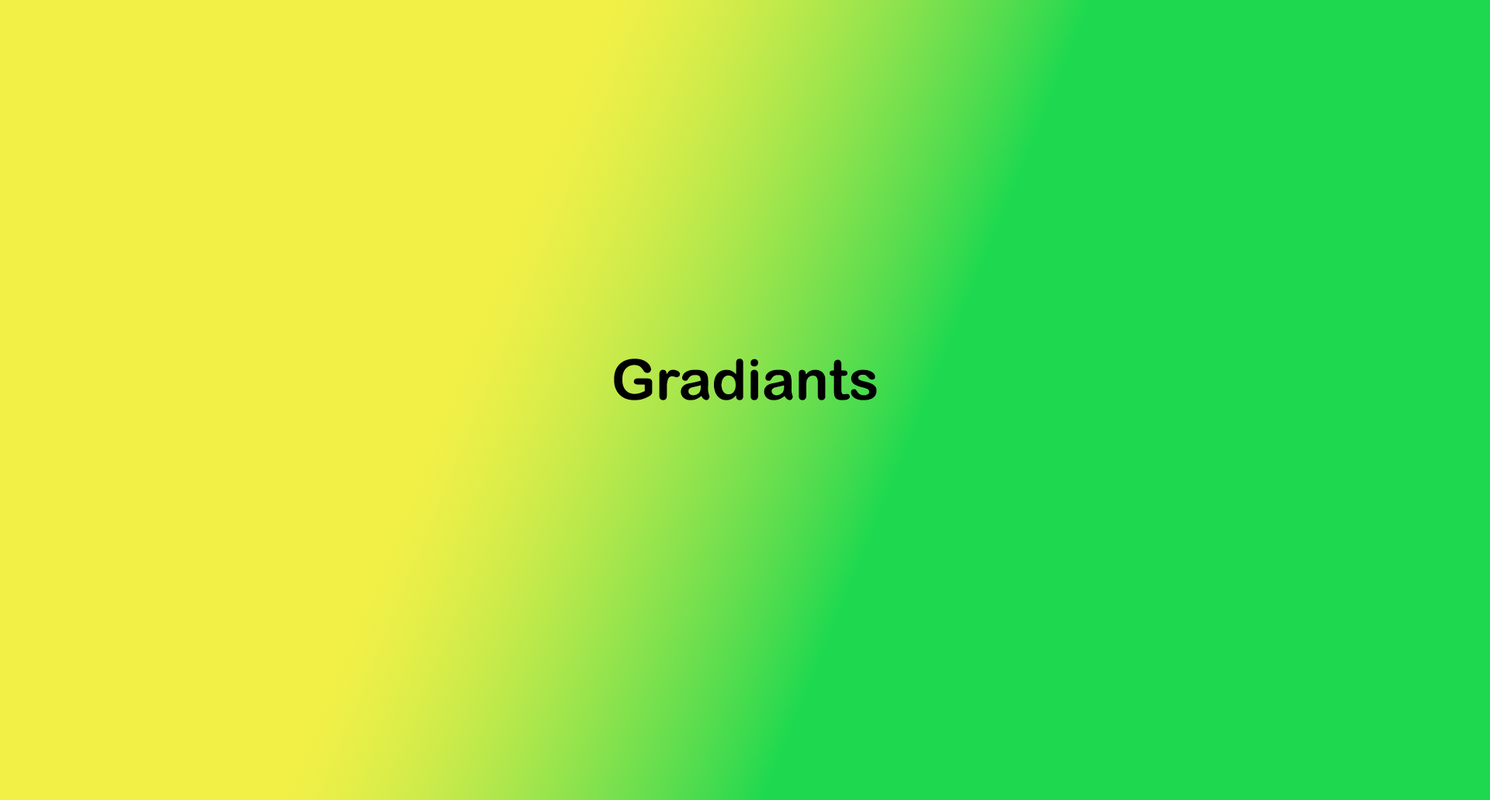
<style>
.page{position:relative;width:1490px;height:800px;background:#1ed94f}
.page>*{position:absolute;margin:0}
.t1{font:55.9px "ArialRoundedMTBold";color:#000000}
</style>
<div class="page">
<p class="t1" style="left:614px;top:359px;width:263px;height:41px">Gradiants</p>
</div>
